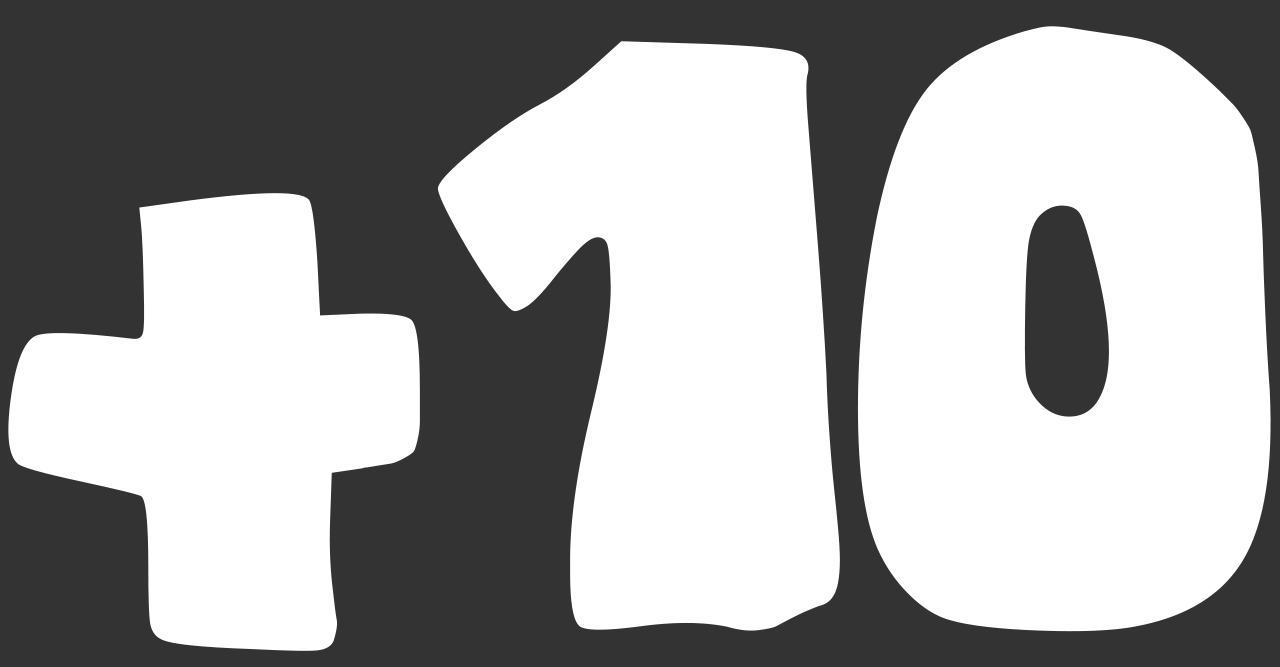
<style>
.page{position:relative;width:1280px;height:667px;background:#ffffff}
.page>*{position:absolute;margin:0}
.t1{font:899.2px "RobinGraffitiFilledin";color:#ffffff}
</style>
<div class="page">
<p class="t1" style="left:8px;top:26px;width:1263px;height:625px">+10</p>
</div>
